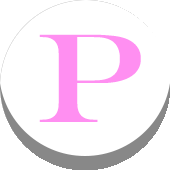
<style>
.page{position:relative;width:170px;height:170px;background:#ffffff}
.page>*{position:absolute;margin:0}
.t1{font:128px "EngraversMT";color:#ff8ff1}
</style>
<div class="page">
<p class="t1" style="left:39px;top:34px;width:102px;height:88px">P</p>
</div>
